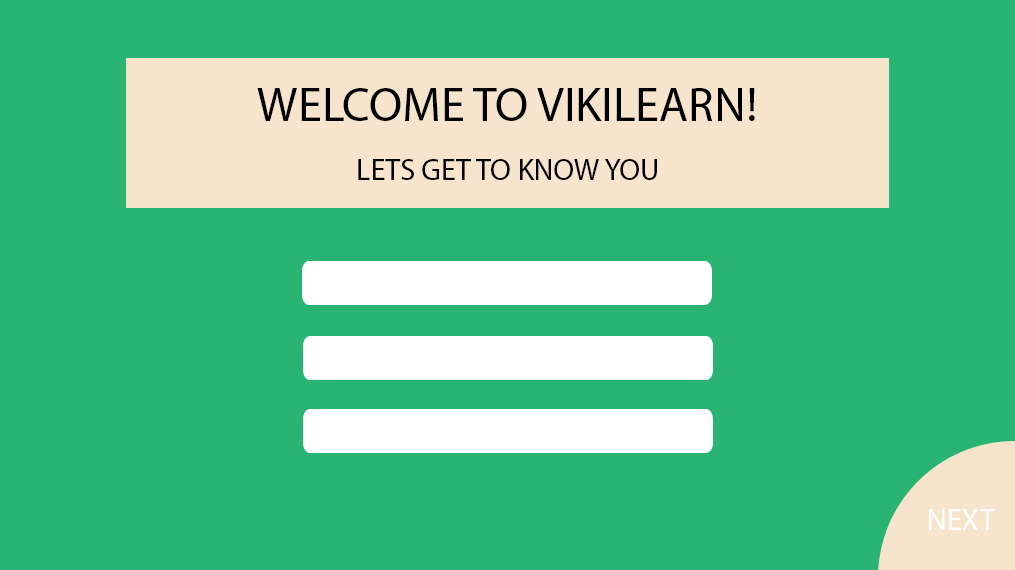
<style>
.page{position:relative;width:1015px;height:570px;background:#29b473}
.page>*{position:absolute;margin:0}
.t1{font:48px "MyriadPro-Regular";color:#000000}
.t2{font:30px "MyriadPro-Regular";color:#000000}
.t3{font:30.6px "MyriadPro-Regular";color:#ffffff}
</style>
<div class="page">
<p class="t1" style="left:257px;top:88px;width:498px;height:33px">WELCOME TO VIKILEARN!</p>
<p class="t2" style="left:358px;top:159px;width:299px;height:21px">LETS GET TO KNOW YOU</p>
<p class="t3" style="left:929px;top:509px;width:66px;height:21px">NEXT</p>
</div>
